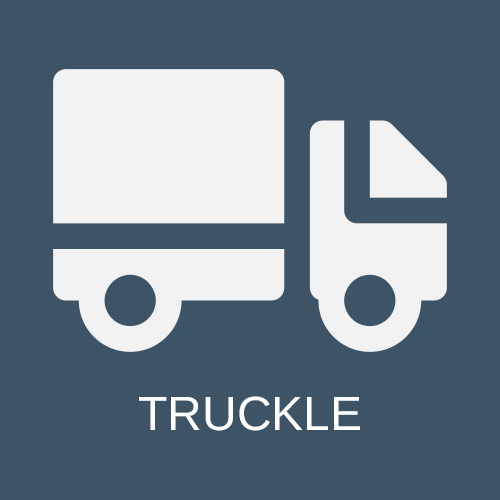
<style>
.page{position:relative;width:500px;height:500px;background:#3d5467}
.page>*{position:absolute;margin:0}
.t1{font:48px "Arimo-Regular";color:#ffffff}
</style>
<div class="page">
<p class="t1" style="left:139px;top:396px;width:221px;height:35px">TRUCKLE</p>
</div>
